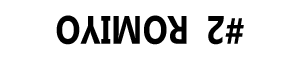
<style>
.page{position:relative;width:300px;height:60px;background:#ffffff}
.page>*{position:absolute;margin:0}
.t1{font:39.7px "Ebrima-Bold";color:#000000;text-transform:uppercase;scale:0.83 1}
</style>
<div class="page">
<p class="t1" style="left:56px;top:15px;width:131px;height:30px;rotate:180deg">romiyo</p>
<p class="t1" style="left:208px;top:16px;width:36px;height:29px;rotate:180deg">#2</p>
</div>
